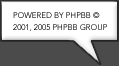
<style>
.page{position:relative;width:119px;height:66px;background:#ffffff}
.page>*{position:absolute;margin:0}
.t1{font:8px/12px "Avenir-Light";color:#000000;text-transform:uppercase}
</style>
<div class="page">
<p class="t1" style="left:13px;top:12px;width:94px;height:19px">Powered by phpBB © 2001, 2005 phpBB Group</p>
<p class="t1" style="left:13px;top:12px;width:94px;height:19px;opacity:0.28">Powered by phpBB © 2001, 2005 phpBB Group</p>
</div>
